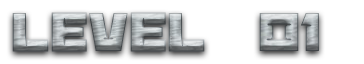
<style>
.page{position:relative;width:364px;height:64px;background:#ffffff}
.page>*{position:absolute;margin:0}
.t1{font:60px "BananaBrick"}
</style>
<div class="page">
<p class="t1" style="left:12px;top:12px;width:307px;height:40px">Level  01</p>
</div>
